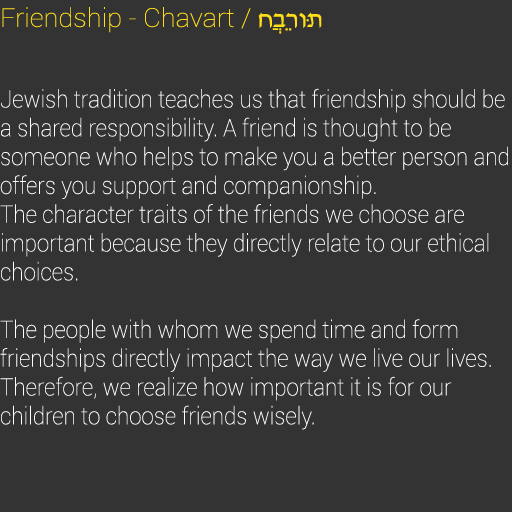
<style>
.page{position:relative;width:512px;height:512px;background:#333333}
.page>*{position:absolute;margin:0}
.t1{font:26px "Roboto-Thin";color:#ffdd17;scale:1.04 1}
.t2{font:26px "David";color:#ffdd17;scale:1.04 1}
.t3{font:24px "Roboto-Thin";color:#ffffff;scale:0.93 1}
</style>
<div class="page">
<p class="t1" style="left:2px;top:7px;width:320px;height:27px">Friendship - Chavart / <span class="t2">חֲבֵרוּת</span></p>
<p class="t3" style="left:0px;top:88px;width:508px;height:342px">Jewish tradition teaches us that friendship should be a shared responsibility. A friend is thought to be someone who helps to make you a better person and offers you support and companionship.<br>The character traits of the friends we choose are <br>important because they directly relate to our ethical choices. <br><br>The people with whom we spend time and form friendships directly impact the way we live our lives. Therefore, we realize how important it is for our <br>children to choose friends wisely.</p>
</div>
